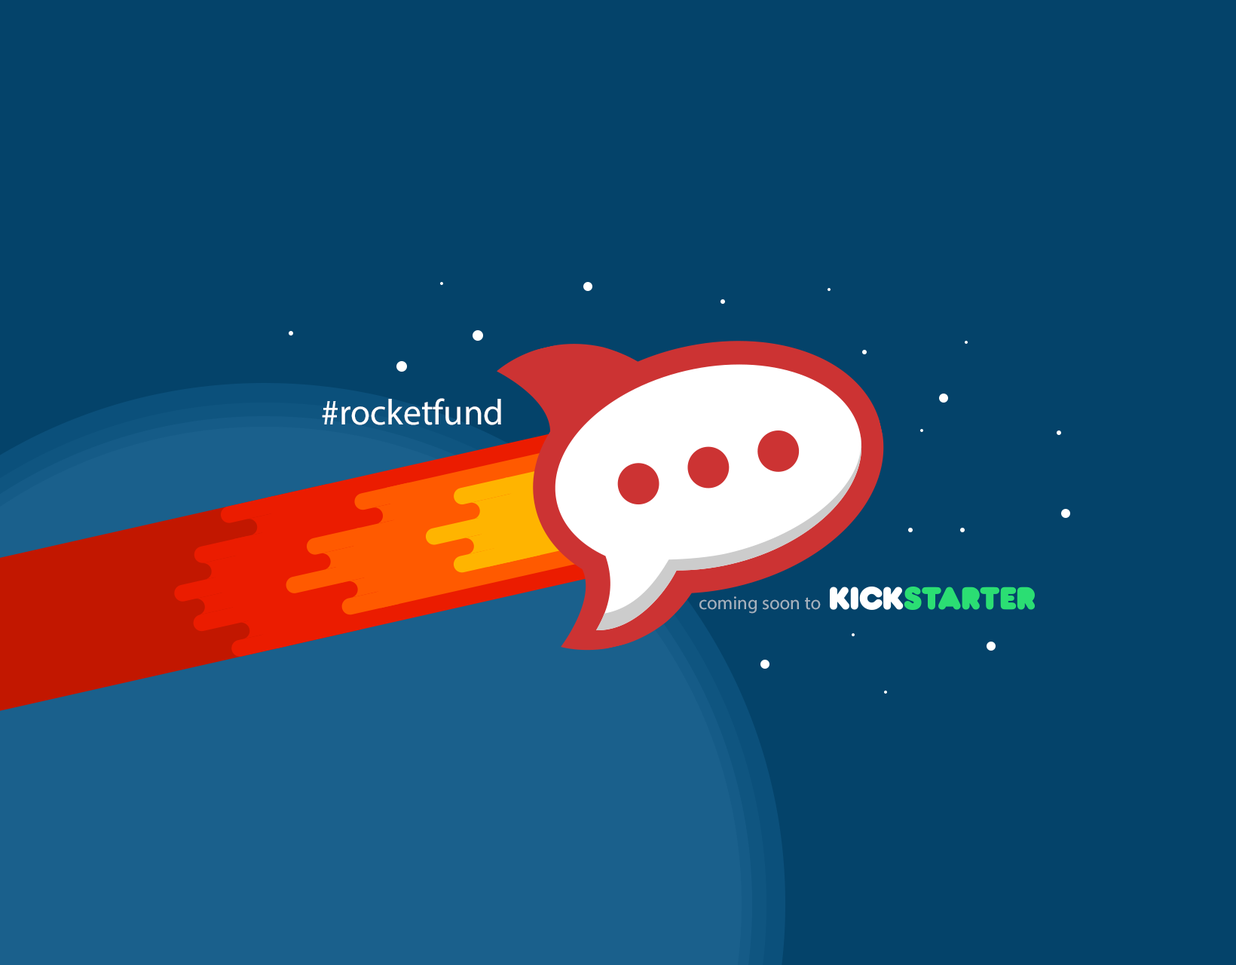
<style>
.page{position:relative;width:1236px;height:965px;background:#04436a}
.page>*{position:absolute;margin:0}
.t1{font:36.1px "MyriadPro-Regular";color:#ffffff}
.t2{font:18.7px "MyriadPro-Regular";color:#a4b2be}
</style>
<div class="page">
<p class="t1" style="left:322px;top:398px;width:179px;height:27px">#rocketfund</p>
<p class="t2" style="left:699px;top:596px;width:122px;height:17px">coming soon to</p>
</div>
